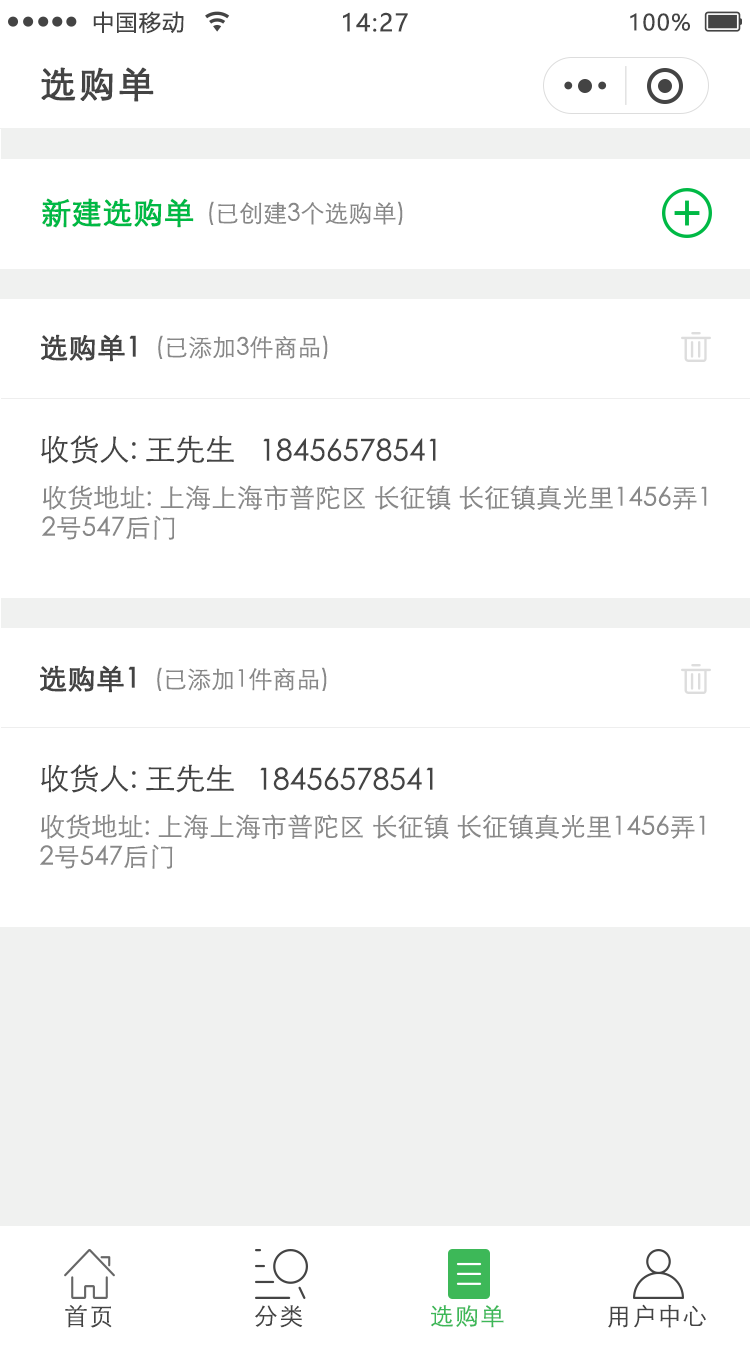
<style>
.page{position:relative;width:750px;height:1347px;background:#ffffff}
.page>*{position:absolute;margin:0}
.t1{font:22px "MicrosoftYaHei";letter-spacing:0.06em;color:#444444}
.t2{font:24px "MicrosoftYaHei";letter-spacing:0.06em;color:#444444}
.t3{font:36px "STXihei";letter-spacing:0.06em;color:#444444;font-weight:bold}
.t4{font:30px "STXihei";color:#00b945;font-weight:bold}
.t5{font:24px "STXihei";color:#888888}
.t6{font:28px "STXihei";color:#444444;font-weight:bold}
.t7{font:30px "STXihei";color:#444444}
.t8{font:26px/30px "STXihei";color:#888888}
.t9{font:23.9px "STXihei";letter-spacing:0.06em;color:#444444}
.t10{font:23.9px "STXihei";letter-spacing:0.06em;color:#3db858}
</style>
<div class="page">
<p class="t1" style="left:93px;top:11px;width:91px;height:23px">中国移动</p>
<p class="t2" style="left:343px;top:12px;width:65px;height:20px">14:27</p>
<p class="t1" style="left:630px;top:13px;width:60px;height:18px">100%</p>
<p class="t3" style="left:41px;top:67px;width:113px;height:35px">选购单</p>
<p class="t4" style="left:42px;top:198px;width:152px;height:30px">新建选购单</p>
<p class="t5" style="left:209px;top:201px;width:194px;height:24px">(已创建3个选购单)</p>
<p class="t6" style="left:41px;top:334px;width:95px;height:28px">选购单1</p>
<p class="t5" style="left:158px;top:335px;width:170px;height:24px">(已添加3件商品)</p>
<p class="t7" style="left:41px;top:435px;width:193px;height:29px">收货人: 王先生</p>
<p class="t7" style="left:263px;top:438px;width:173px;height:24px">18456578541</p>
<p class="t8" style="left:42px;top:485px;width:665px;height:55px">收货地址: 上海上海市普陀区 长征镇 长征镇真光里1456弄1<br>2号547后门</p>
<p class="t6" style="left:40px;top:665px;width:95px;height:28px">选购单1</p>
<p class="t5" style="left:157px;top:667px;width:170px;height:24px">(已添加1件商品)</p>
<p class="t7" style="left:41px;top:764px;width:193px;height:29px">收货人: 王先生</p>
<p class="t7" style="left:260px;top:767px;width:173px;height:24px">18456578541</p>
<p class="t8" style="left:40px;top:814px;width:665px;height:55px">收货地址: 上海上海市普陀区 长征镇 长征镇真光里1456弄1<br>2号547后门</p>
<p class="t9" style="left:65px;top:1304px;width:47px;height:24px">首页</p>
<p class="t9" style="left:255px;top:1305px;width:48px;height:23px">分类</p>
<p class="t10" style="left:431px;top:1305px;width:73px;height:23px">选购单</p>
<p class="t9" style="left:608px;top:1304px;width:98px;height:24px">用户中心</p>
</div>
